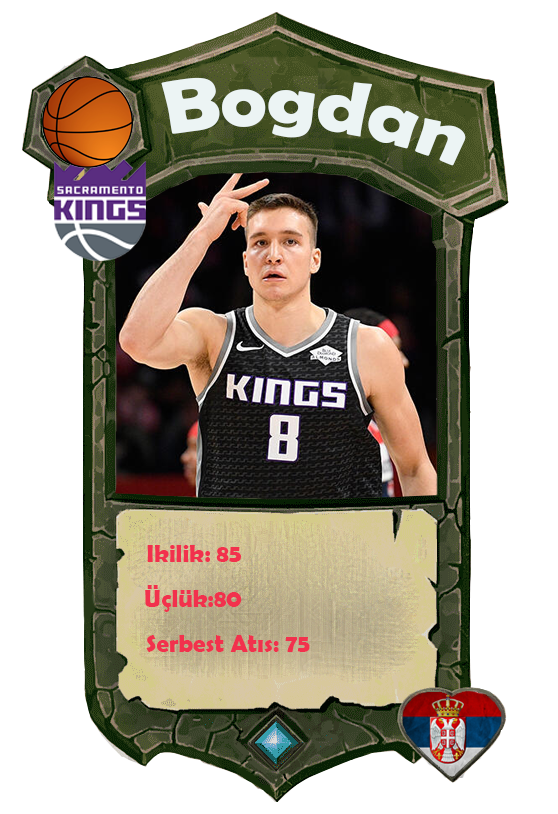
<style>
.page{position:relative;width:558px;height:814px;background:#ffffff}
.page>*{position:absolute;margin:0}
.t1{font:75.7px "BerlinSansFBDemi-Bold";color:#ecf4f4;scale:1.06 1}
.t2{font:25px "BerlinSansFBDemi-Bold";color:#f2314d}
</style>
<div class="page">
<p class="t1" style="left:161px;top:77px;width:305px;height:89px;rotate:6deg">Bogdan</p>
<p class="t2" style="left:147px;top:545px;width:94px;height:17px">Ikilik: 85</p>
<p class="t2" style="left:145px;top:585px;width:97px;height:27px">Üçlük:80</p>
<p class="t2" style="left:146px;top:635px;width:164px;height:17px">Serbest Atıs: 75</p>
</div>
